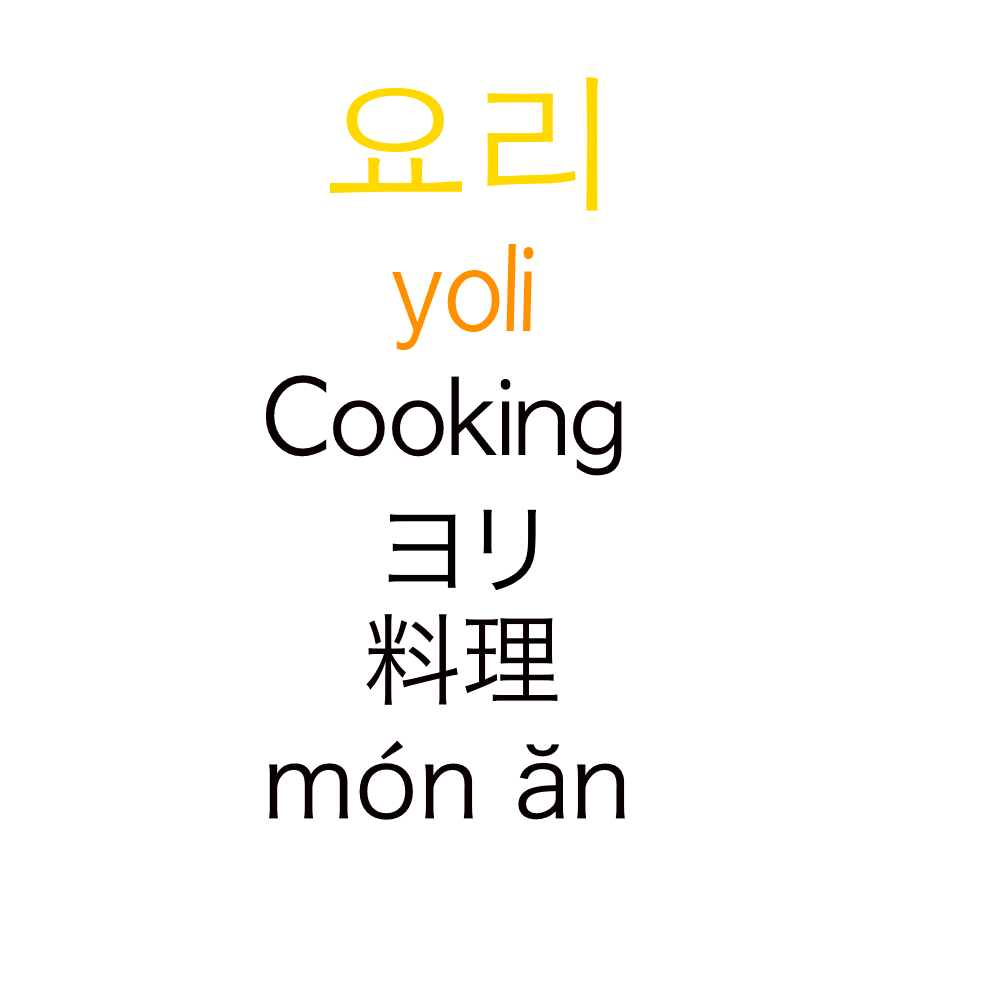
<style>
.page{position:relative;width:1000px;height:1000px;background:#ffffff}
.page>*{position:absolute;margin:0}
.t1{font:150px "AppleGothic";color:#ffd800}
.t2{font:111.2px "AppleGothic";color:#ff9000;scale:0.9 1}
.t3{font:100px "AppleGothic";color:#080000}
.t4{font:100px "HiraKakuProN-W3";color:#000000}
.t5{font:100px "HiraKakuProN-W3";color:#080000}
</style>
<div class="page">
<p class="t1" style="left:329px;top:77px;width:270px;height:134px">요리</p>
<p class="t2" style="left:392px;top:244px;width:142px;height:106px">yoli</p>
<p class="t3" style="left:265px;top:375px;width:357px;height:101px">Cooking</p>
<p class="t4" style="left:388px;top:509px;width:148px;height:82px">ヨリ</p>
<p class="t5" style="left:366px;top:614px;width:192px;height:91px">料理</p>
<p class="t5" style="left:269px;top:740px;width:356px;height:80px">món ăn</p>
</div>
